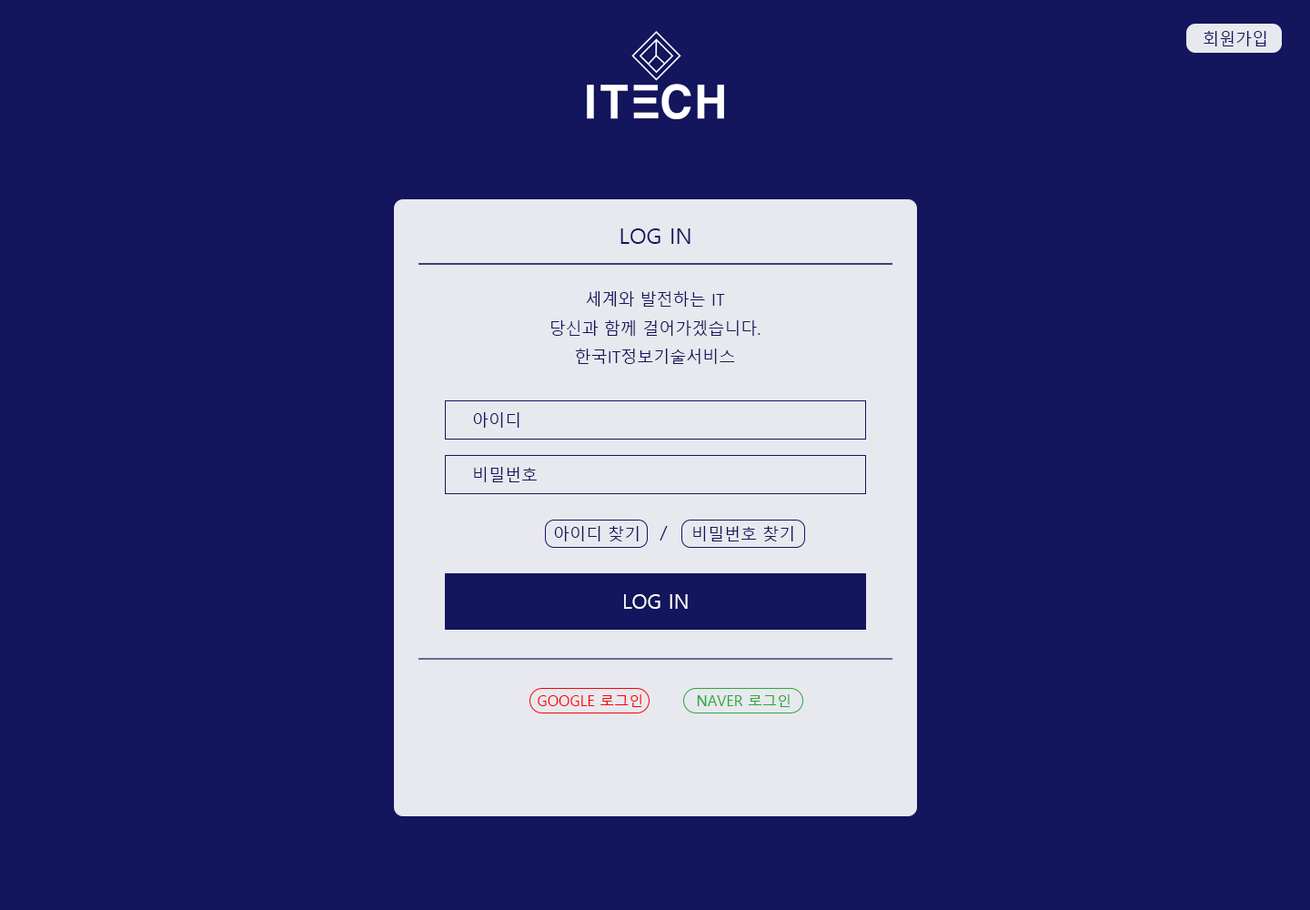
<style>
.page{position:relative;width:1310px;height:910px;background:#13155d}
.page>*{position:absolute;margin:0}
.t1{font:16.4px "MalgunGothic";color:#13155d}
.t2{font:21.8px "MalgunGothic";color:#13155d}
.t3{font:18.2px "MalgunGothic";color:#13155d}
.t4{font:20px "MalgunGothic";color:#ffffff}
.t5{font:14.6px "MalgunGothic";color:#ff0000}
.t6{font:14.6px "MalgunGothic";color:#22ac38}
</style>
<div class="page">
<p class="t1" style="left:1204px;top:31px;width:63px;height:15px">회원가입</p>
<p class="t2" style="left:621px;top:228px;width:70px;height:16px">LOG IN</p>
<p class="t1" style="left:551px;top:291px;width:210px;height:73px;text-align:center">세계와 발전하는 IT<br>당신과 함께 걸어가겠습니다.<br>한국IT정보기술서비스</p>
<p class="t1" style="left:473px;top:412px;width:47px;height:16px">아이디</p>
<p class="t1" style="left:474px;top:467px;width:63px;height:15px">비밀번호</p>
<p class="t1" style="left:554px;top:526px;width:85px;height:15px">아이디 찾기</p>
<p class="t3" style="left:660px;top:526px;width:8px;height:15px">/</p>
<p class="t1" style="left:693px;top:526px;width:101px;height:15px">비밀번호 찾기</p>
<p class="t4" style="left:624px;top:594px;width:64px;height:15px">LOG IN</p>
<p class="t5" style="left:538px;top:694px;width:104px;height:13px">GOOGLE 로그인</p>
<p class="t6" style="left:697px;top:694px;width:94px;height:13px">NAVER 로그인</p>
</div>
